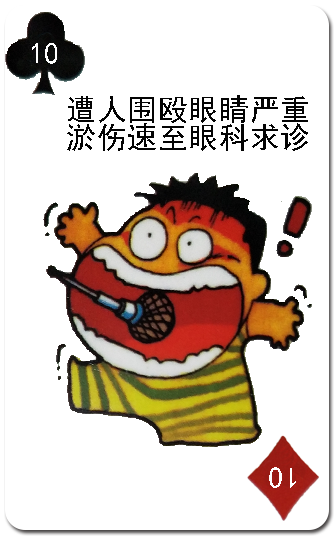
<style>
.page{position:relative;width:335px;height:536px;background:#ffffff}
.page>*{position:absolute;margin:0}
.t1{font:30px "SimHei";letter-spacing:0.02em;color:#ffffff}
.t2{font:30px/28px "SimHei";letter-spacing:0.02em;color:#030303}
</style>
<div class="page">
<p class="t1" style="left:32px;top:43px;width:25px;height:21px">10</p>
<p class="t2" style="left:67px;top:95px;width:241px;height:56px;text-align:center">遭人围殴眼睛严重<br>淤伤速至眼科求诊</p>
<p class="t1" style="left:269px;top:467px;width:27px;height:21px;rotate:-179deg">10</p>
</div>
